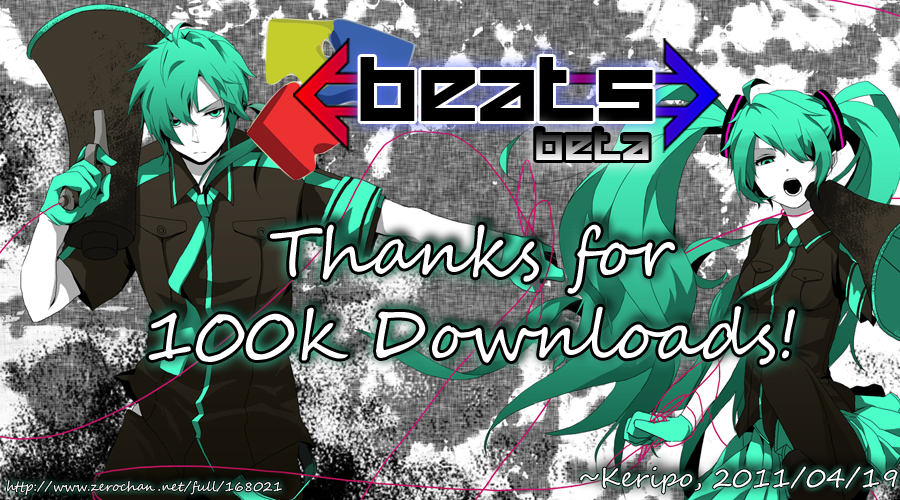
<style>
.page{position:relative;width:900px;height:500px}
.page>*{position:absolute;margin:0}
.t1{font:64px "HappyKiller";color:#000000;scale:1.05 1}
.t2{font:30.9px "HappyKiller";scale:1.05 1}
.t3{font:68.8px "SegoeScript";color:#ffffff}
.t4{font:26.6px "SegoeScript";color:#ffffff}
.t5{font:13.1px "SegoeScript";color:#ffffff}
</style>
<div class="page">
<p class="t1" style="left:360px;top:57px;width:293px;height:64px">beats</p>
<p class="t2" style="left:536px;top:129px;width:113px;height:31px">beta</p>
<p class="t3" style="left:148px;top:224px;width:647px;height:141px;text-align:center">Thanks for<br>100k Downloads!</p>
<p class="t4" style="left:580px;top:466px;width:318px;height:28px">~Keripo, 2011/04/19</p>
<p class="t5" style="left:7px;top:480px;width:275px;height:15px">http://www.zerochan.net/full/168021</p>
</div>
